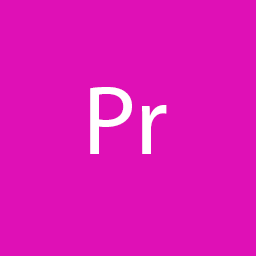
<style>
.page{position:relative;width:256px;height:256px;background:#df10b6}
.page>*{position:absolute;margin:0}
.t1{font:100px "MyriadPro-Regular";color:#ffffff}
</style>
<div class="page">
<p class="t1" style="left:90px;top:87px;width:77px;height:67px">Pr</p>
</div>
